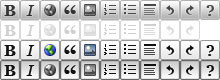
<style>
.page{position:relative;width:220px;height:80px}
.page>*{position:absolute;margin:0}
.t1{font:16px "Georgia-Bold";color:#333333}
.t2{font:16px "Georgia-Italic";color:#333333}
.t3{font:26px "Georgia-Bold";color:#333333}
.t4{font:16px "Georgia-Bold";color:#494949}
.t5{font:16px "Georgia-Bold";color:#cfcfcf}
.t6{font:16px "Georgia-Italic";color:#cfcfcf}
.t7{font:26px "Georgia-Bold";color:#cfcfcf}
.t8{font:16px "Georgia-Bold";color:#111111}
.t9{font:16px "Georgia-Italic";color:#111111}
.t10{font:26px "Georgia-Bold";color:#111111}
</style>
<div class="page">
<p class="t1" style="left:4px;top:5px;width:12px;height:11px">B</p>
<p class="t2" style="left:26px;top:5px;width:9px;height:11px">I</p>
<p class="t3" style="left:64px;top:5px;width:12px;height:9px">“</p>
<p class="t4" style="left:206px;top:5px;width:8px;height:11px">?</p>
<p class="t5" style="left:4px;top:25px;width:12px;height:11px">B</p>
<p class="t6" style="left:26px;top:25px;width:9px;height:11px">I</p>
<p class="t7" style="left:64px;top:25px;width:12px;height:9px">“</p>
<p class="t8" style="left:4px;top:45px;width:12px;height:11px">B</p>
<p class="t9" style="left:26px;top:45px;width:9px;height:11px">I</p>
<p class="t10" style="left:64px;top:45px;width:12px;height:9px">“</p>
<p class="t8" style="left:206px;top:45px;width:8px;height:11px">?</p>
<p class="t8" style="left:4px;top:65px;width:12px;height:11px">B</p>
<p class="t9" style="left:26px;top:65px;width:9px;height:11px">I</p>
<p class="t10" style="left:64px;top:65px;width:12px;height:9px">“</p>
<p class="t8" style="left:206px;top:65px;width:8px;height:11px">?</p>
</div>
